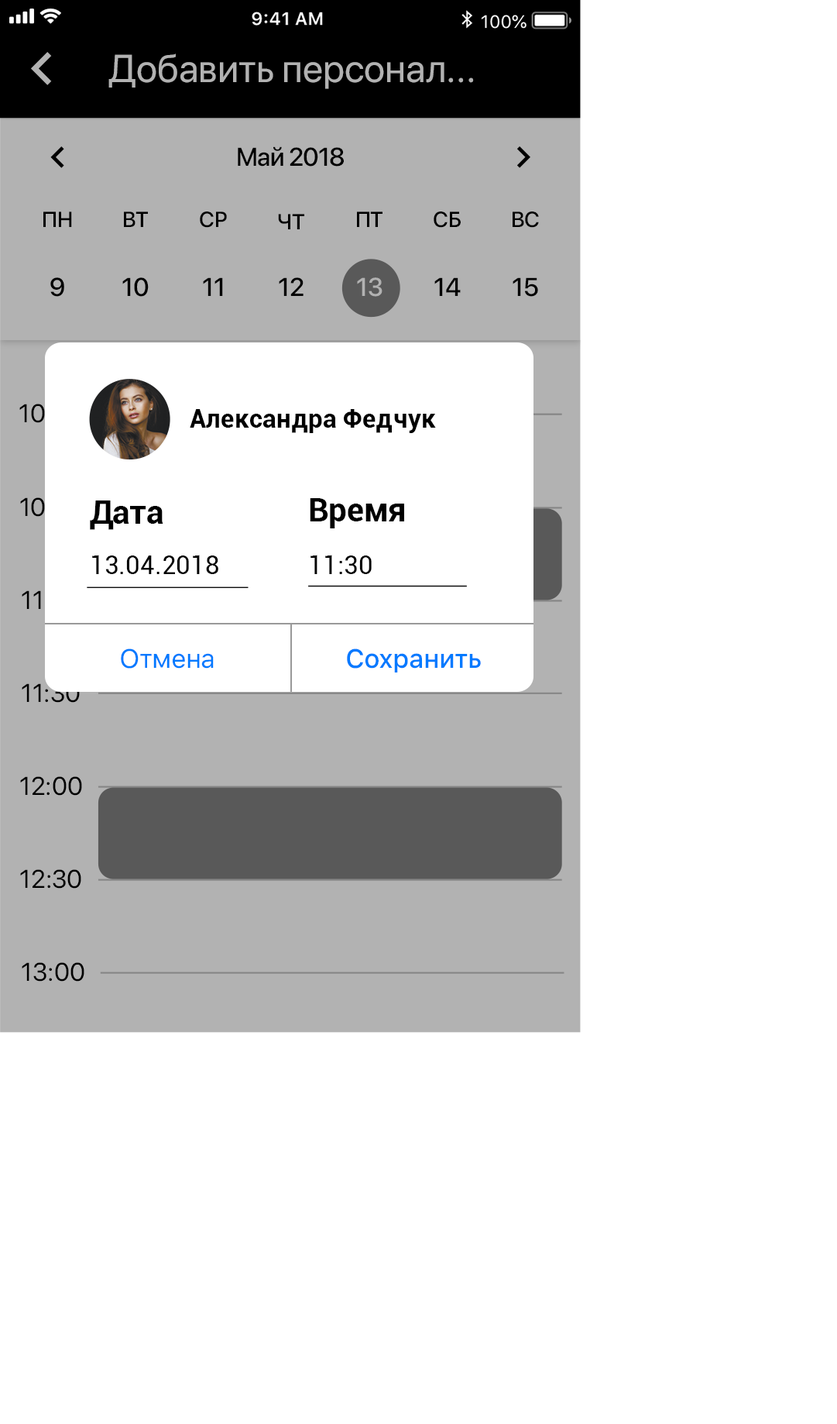
<style>
.page{position:relative;width:837px;height:1424px;background:#ffffff}
.page>*{position:absolute;margin:0}
.t1{font:38.7px "SFProDisplay-Regular";color:#b2b2b2}
.t2{font:25.6px "SFProDisplay-Medium";letter-spacing:-0.023em;color:#000000}
.t3{font:21.7px "SFProDisplay-Medium";color:#000000}
.t4{font:25.6px "SFProDisplay-Medium";color:#000000}
.t5{font:25.6px "SFProDisplay-Medium";color:#b2b2b2}
.t6{font:25.6px "SFProDisplay-Regular"}
.t7{font:25.8px "Roboto-Bold";color:#000000}
.t8{font:32.3px "Roboto-Bold";color:#000000}
.t9{font:25.8px "Roboto-Regular";color:#000000}
.t10{font:26.3px "SFProText-Regular";letter-spacing:-0.024em;color:#007aff}
.t11{font:26.3px "SFProText-Medium";letter-spacing:-0.024em;color:#007aff}
.t12{font:25.6px "SFProDisplay-Regular";color:#000000}
</style>
<div class="page">
<p class="t1" style="left:108px;top:53px;width:366px;height:36px">Добавить персонал...</p>
<p class="t2" style="left:238px;top:146px;width:106px;height:21px">Май 2018</p>
<p class="t3" style="left:43px;top:211px;width:29px;height:16px">ПН</p>
<p class="t3" style="left:124px;top:211px;width:24px;height:16px">ВТ</p>
<p class="t3" style="left:200px;top:211px;width:27px;height:17px">СР</p>
<p class="t3" style="left:278px;top:214px;width:26px;height:15px">ЧТ</p>
<p class="t3" style="left:357px;top:211px;width:26px;height:16px">ПТ</p>
<p class="t3" style="left:434px;top:211px;width:27px;height:17px">СБ</p>
<p class="t3" style="left:513px;top:211px;width:26px;height:17px">ВС</p>
<p class="t4" style="left:50px;top:277px;width:14px;height:20px">9</p>
<p class="t4" style="left:122px;top:277px;width:27px;height:20px">10</p>
<p class="t4" style="left:203px;top:277px;width:20px;height:19px">11</p>
<p class="t4" style="left:279px;top:277px;width:25px;height:19px">12</p>
<p class="t5" style="left:357px;top:277px;width:26px;height:20px">13</p>
<p class="t4" style="left:435px;top:277px;width:26px;height:19px">14</p>
<p class="t4" style="left:513px;top:277px;width:25px;height:20px">15</p>
<p class="t6" style="left:19px;top:404px;width:63px;height:19px">10:00</p>
<p class="t7" style="left:190px;top:409px;width:246px;height:24px">Александра Федчук</p>
<p class="t6" style="left:20px;top:497px;width:62px;height:20px">10:30</p>
<p class="t8" style="left:90px;top:500px;width:73px;height:30px">Дата</p>
<p class="t8" style="left:310px;top:498px;width:94px;height:30px">Время</p>
<p class="t9" style="left:92px;top:555px;width:126px;height:19px">13.04.2018</p>
<p class="t9" style="left:311px;top:555px;width:61px;height:19px">11:30</p>
<p class="t10" style="left:121px;top:648px;width:93px;height:21px">Отмена</p>
<p class="t11" style="left:347px;top:648px;width:134px;height:24px">Сохранить</p>
<p class="t12" style="left:22px;top:683px;width:58px;height:20px">11:30</p>
<p class="t12" style="left:20px;top:776px;width:62px;height:20px">12:00</p>
<p class="t12" style="left:20px;top:869px;width:61px;height:20px">12:30</p>
<p class="t12" style="left:22px;top:962px;width:62px;height:20px">13:00</p>
</div>
